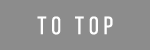
<style>
.page{position:relative;width:150px;height:50px;background:#8c8c8c}
.page>*{position:absolute;margin:0}
.t1{font:25px "BebasNeueRegular";letter-spacing:0.2em;color:#ffffff}
</style>
<div class="page">
<p class="t1" style="left:37px;top:16px;width:76px;height:19px">to top</p>
</div>
